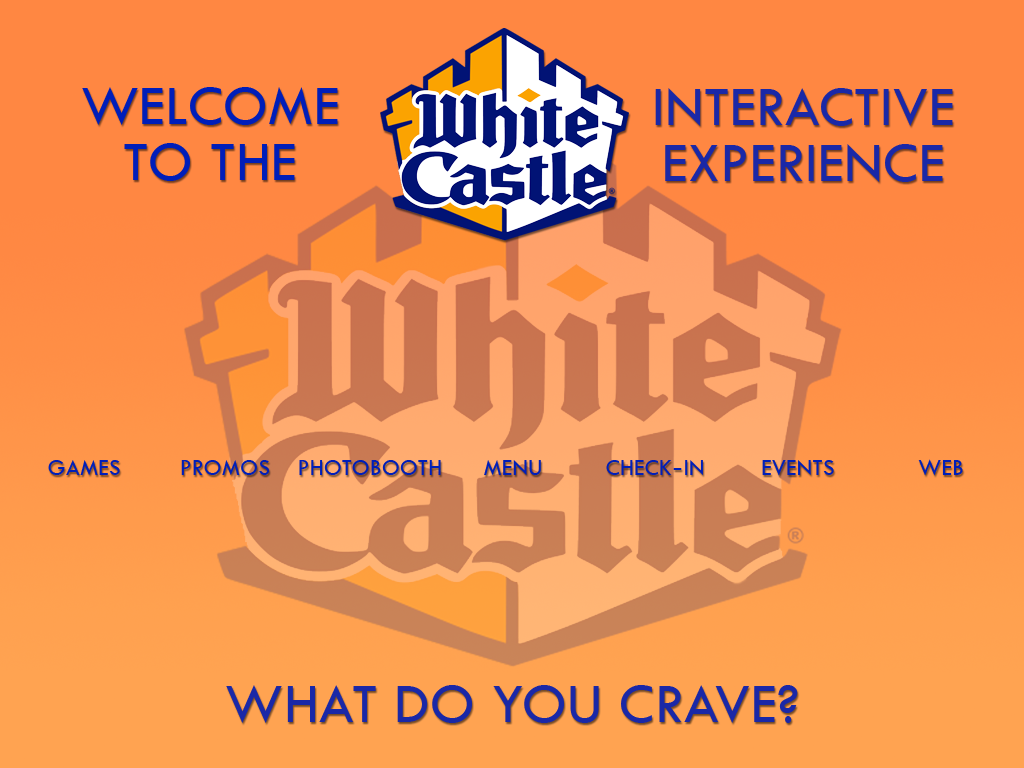
<style>
.page{position:relative;width:1024px;height:768px;background:#ff8742}
.page>*{position:absolute;margin:0}
.t1{font:57.9px/56.2px "TwCenMT-Regular";letter-spacing:0.01em;color:#001eb9;font-variant:small-caps}
.t2{font:57.9px/56.2px "TwCenMT-Regular";letter-spacing:0.01em;color:#1a28a7;font-variant:small-caps}
.t3{font:33.3px "TwCenMT-Regular";letter-spacing:0.01em;color:#001eb9;font-variant:small-caps}
.t4{font:57.9px "TwCenMT-Regular";letter-spacing:0.01em;color:#1a28a7;font-variant:small-caps}
</style>
<div class="page">
<p class="t1" style="left:82px;top:87px;width:256px;height:94px;text-align:center">WELCOME<br>TO THE</p>
<p class="t2" style="left:655px;top:88px;width:298px;height:94px;text-align:center">INTERACTIVE<br>EXPERIENCE</p>
<p class="t3" style="left:48px;top:460px;width:72px;height:15px">games</p>
<p class="t3" style="left:181px;top:460px;width:89px;height:15px">promos</p>
<p class="t3" style="left:299px;top:460px;width:142px;height:15px">photobooth</p>
<p class="t3" style="left:484px;top:460px;width:57px;height:15px">menu</p>
<p class="t3" style="left:606px;top:460px;width:97px;height:15px">check-in</p>
<p class="t3" style="left:762px;top:460px;width:72px;height:16px">events</p>
<p class="t3" style="left:918px;top:459px;width:45px;height:17px">web</p>
<p class="t4" style="left:226px;top:685px;width:572px;height:38px">WHAT DO YOU CRAVE?</p>
</div>
